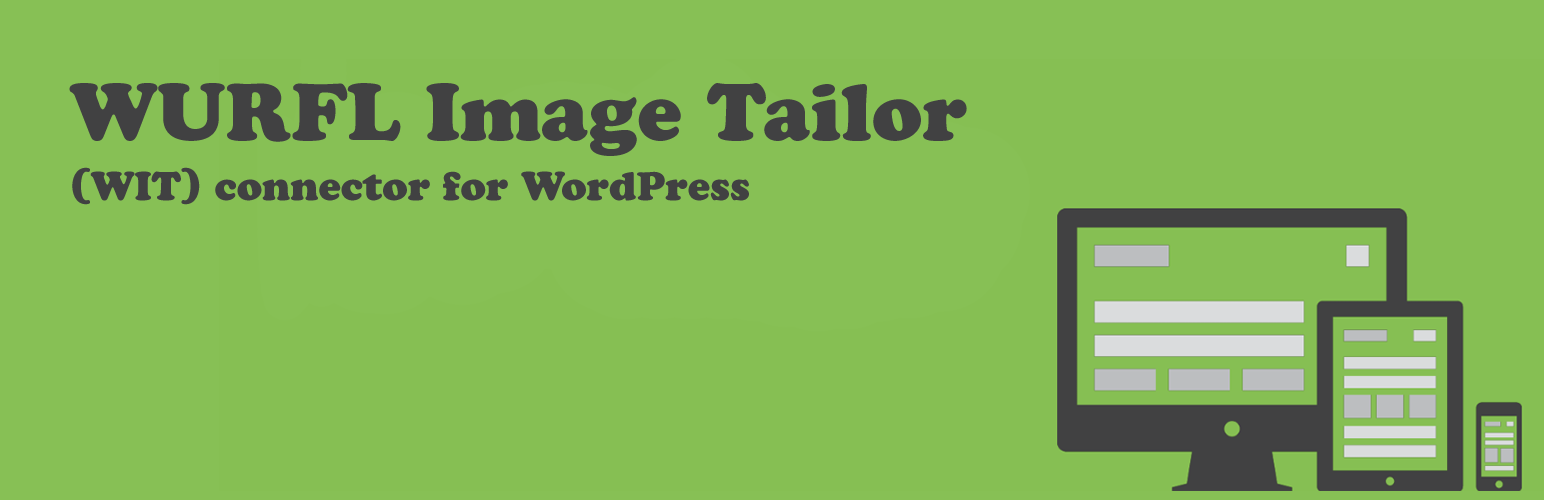
<style>
.page{position:relative;width:1544px;height:500px;background:#87c055}
.page>*{position:absolute;margin:0}
.t1{font:40px/60px "CooperBlackStd";color:#414142}
.t2{font:80px/60px "CooperBlackStd";color:#414142}
</style>
<div class="page">
<p class="t1" style="left:69px;top:83px;width:898px;height:122px"><span class="t2">WURFL Image Tailor<br></span>(WIT) connector for WordPress</p>
</div>
